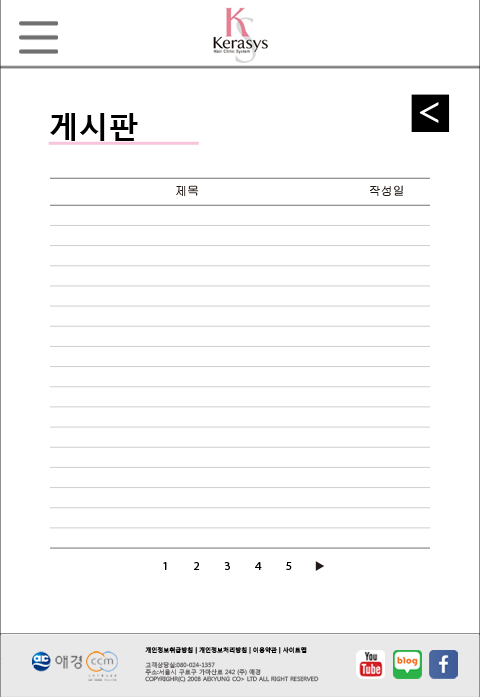
<style>
.page{position:relative;width:480px;height:697px;background:#ffffff}
.page>*{position:absolute;margin:0}
.t1{font:43.2px "MalgunGothicRegular";color:#ffffff}
.t2{font:30px "MalgunGothicBold";color:#010000}
.t3{font:12px "MalgunGothic-Semilight";color:#231916}
.t4{font:12px "MyriadPro-Regular";color:#000000}
.t5{font:6px "MalgunGothicRegular";color:#6e6b6b}
.t6{font:6px "MalgunGothicRegular";color:#000000}
</style>
<div class="page">
<p class="t1" style="left:419px;top:102px;width:20px;height:21px">&lt;</p>
<p class="t2" style="left:50px;top:113px;width:88px;height:28px">게시판</p>
<p class="t3" style="left:176px;top:185px;width:23px;height:11px">제목</p>
<p class="t3" style="left:370px;top:185px;width:33px;height:11px">작성일</p>
<p class="t4" style="left:163px;top:562px;width:4px;height:8px">1</p>
<p class="t4" style="left:194px;top:562px;width:6px;height:8px">2</p>
<p class="t4" style="left:224px;top:562px;width:6px;height:8px">3</p>
<p class="t4" style="left:255px;top:562px;width:7px;height:8px">4</p>
<p class="t4" style="left:286px;top:562px;width:6px;height:8px">5</p>
<p class="t5" style="left:145px;top:647px;width:174px;height:36px;text-align:justify"><span class="t6">개인정보취급방침 | 개인정보처리방침 | 이용약관 | 사이트맵<br><br></span>고객상당실:080-024-1357<br>주소:서울시 구로구 가마산로 242 (주) 애경<br>COPYRIGHR(C) 2008 AEKYUNG CO&gt; LTD ALL RIGHT RESERVED</p>
</div>
